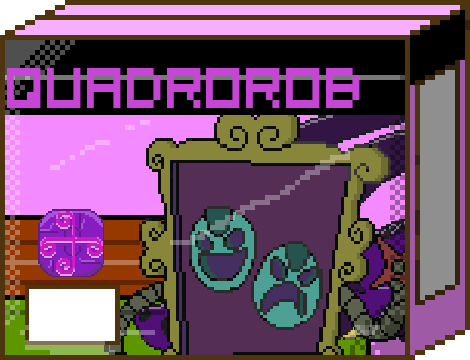
<style>
.page{position:relative;width:470px;height:360px}
.page>*{position:absolute;margin:0}
.t1{font:64px "5x5-Pixel";color:#c745d5;scale:0.83 1}
</style>
<div class="page">
<p class="t1" style="left:7px;top:68px;width:353px;height:40px">QUADROROB</p>
</div>
